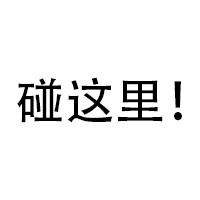
<style>
.page{position:relative;width:200px;height:200px;background:#ffffff}
.page>*{position:absolute;margin:0}
.t1{font:50px "AdobeHeitiStd-Regular";color:#000000}
</style>
<div class="page">
<p class="t1" style="left:17px;top:77px;width:165px;height:46px">碰这里！</p>
</div>
